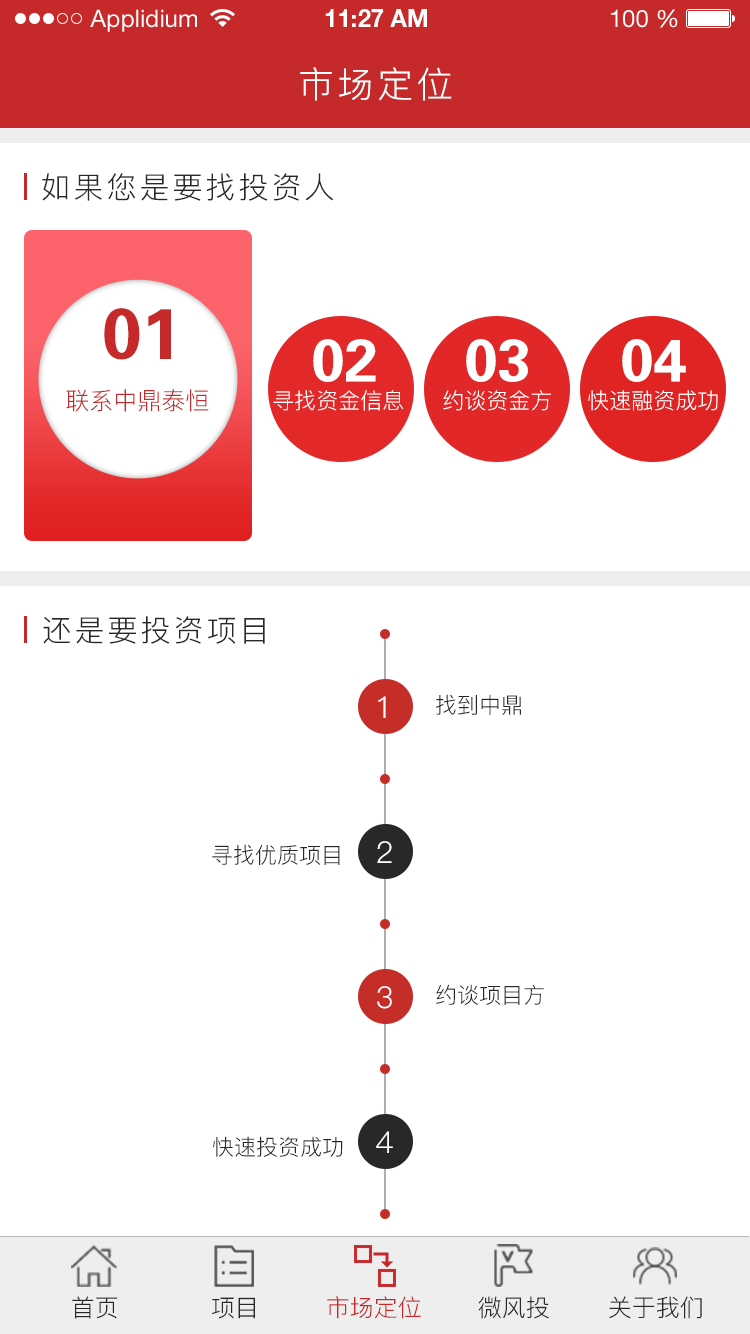
<style>
.page{position:relative;width:750px;height:1334px;background:#ffffff}
.page>*{position:absolute;margin:0}
.t1{font:24px "HelveticaNeueLTStd-Roman";color:#ffffff}
.t2{font:24px "HelveticaNeueLTStd-Bd";color:#ffffff}
.t3{font:36px "PingFang-SC-Regular";letter-spacing:0.1em;color:#ffffff;text-transform:uppercase}
.t4{font:30px "PingFang-SC-Regular";letter-spacing:0.1em;color:#282828;text-transform:uppercase}
.t5{font:72px "JZhongYi";color:#c5292a;text-transform:uppercase}
.t6{font:60px "JZhongYi";color:#ffffff;text-transform:uppercase}
.t7{font:24px "PingFang-SC-Regular";color:#c5292a;text-transform:uppercase}
.t8{font:22px "PingFang-SC-Regular";color:#ffffff;text-transform:uppercase}
.t9{font:30px "PingFang-SC-Regular";color:#ffffff}
.t10{font:22px "PingFang-SC-Regular";color:#282828}
.t11{font:24px "PingFang-SC-Regular";color:#282828}
.t12{font:24px "PingFang-SC-Regular";color:#c5292a}
</style>
<div class="page">
<p class="t1" style="left:90px;top:9px;width:107px;height:23px">Applidium</p>
<p class="t2" style="left:325px;top:9px;width:102px;height:18px">11:27 AM</p>
<p class="t1" style="left:611px;top:9px;width:67px;height:19px">100 %</p>
<p class="t3" style="left:300px;top:67px;width:152px;height:34px">市场定位</p>
<p class="t4" style="left:42px;top:173px;width:292px;height:28px">如果您是要找投资人</p>
<p class="t5" style="left:104px;top:308px;width:67px;height:52px">01</p>
<p class="t6" style="left:313px;top:339px;width:63px;height:43px">02</p>
<p class="t6" style="left:466px;top:339px;width:62px;height:43px">03</p>
<p class="t6" style="left:622px;top:339px;width:64px;height:43px">04</p>
<p class="t7" style="left:66px;top:389px;width:143px;height:23px">联系中鼎泰恒</p>
<p class="t8" style="left:273px;top:390px;width:131px;height:21px">寻找资金信息</p>
<p class="t8" style="left:443px;top:390px;width:108px;height:21px">约谈资金方</p>
<p class="t8" style="left:588px;top:390px;width:130px;height:21px">快速融资成功</p>
<p class="t4" style="left:43px;top:616px;width:222px;height:28px">还是要投资项目</p>
<p class="t9" style="left:378px;top:696px;width:8px;height:22px">１</p>
<p class="t10" style="left:436px;top:694px;width:85px;height:21px">找到中鼎</p>
<p class="t10" style="left:212px;top:844px;width:128px;height:21px">寻找优质项目</p>
<p class="t9" style="left:377px;top:841px;width:15px;height:22px">２</p>
<p class="t9" style="left:377px;top:986px;width:15px;height:23px">３</p>
<p class="t10" style="left:436px;top:984px;width:108px;height:21px">约谈项目方</p>
<p class="t9" style="left:376px;top:1131px;width:17px;height:22px">４</p>
<p class="t10" style="left:213px;top:1136px;width:130px;height:21px">快速投资成功</p>
<p class="t11" style="left:72px;top:1296px;width:46px;height:23px">首页</p>
<p class="t11" style="left:212px;top:1297px;width:43px;height:22px">项目</p>
<p class="t12" style="left:327px;top:1296px;width:94px;height:23px">市场定位</p>
<p class="t11" style="left:478px;top:1296px;width:71px;height:23px">微风投</p>
<p class="t11" style="left:609px;top:1296px;width:93px;height:23px">关于我们</p>
</div>
